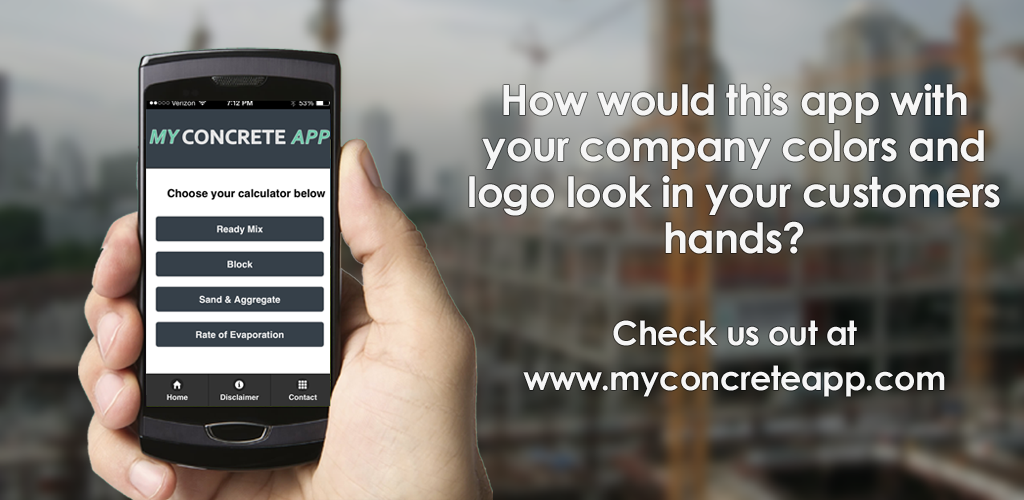
<style>
.page{position:relative;width:1024px;height:500px}
.page>*{position:absolute;margin:0}
.t1{font:41.7px/45.8px "CenturyGothic-Bold";letter-spacing:-0.02em;color:#f6f6f6}
.t2{font:33.3px/45.8px "CenturyGothic-Bold";letter-spacing:-0.02em;color:#f6f6f6}
</style>
<div class="page">
<p class="t1" style="left:469px;top:83px;width:531px;height:314px;text-align:center">How would this app with your company colors and logo look in your customers hands?<br><span class="t2"><br>Check us out at<br>www.myconcreteapp.com</span></p>
</div>
